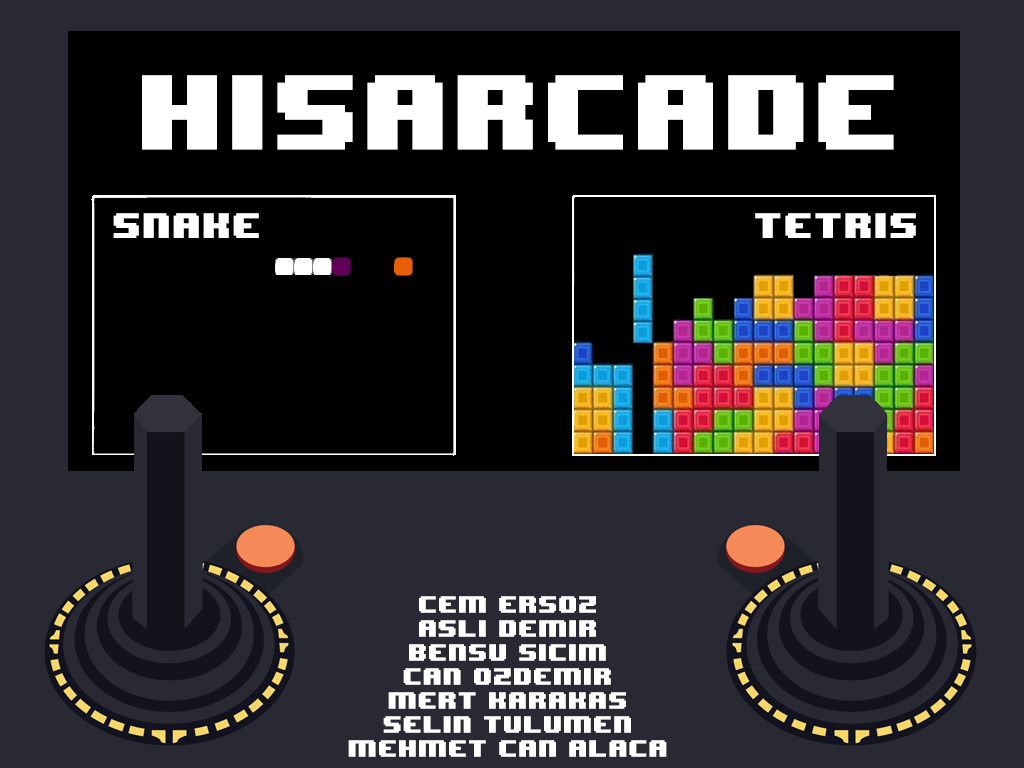
<style>
.page{position:relative;width:1024px;height:768px;background:#292933}
.page>*{position:absolute;margin:0}
.t1{font:89.1px "8BITWONDERNominal";letter-spacing:0.002em;color:#ffffff}
.t2{font:29.7px "8BITWONDERNominal";letter-spacing:0.002em;color:#ffffff}
.t3{font:19.8px "8BITWONDERNominal";letter-spacing:0.002em;color:#ffffff}
</style>
<div class="page">
<p class="t1" style="left:142px;top:75px;width:752px;height:75px">HISARCADE</p>
<p class="t2" style="left:113px;top:213px;width:146px;height:25px">SNAKE</p>
<p class="t2" style="left:755px;top:213px;width:161px;height:25px">TETRIS</p>
<p class="t3" style="left:348px;top:596px;width:319px;height:161px;text-align:center">CEM ERSOZ<br>AslI DEMIR<br>BENSU Sicim<br>can ozdemir<br>mert karakas<br>selin tulumen<br>MEHMET CAN ALACA</p>
</div>
